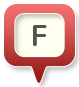
<style>
.page{position:relative;width:79px;height:87px;background:#ffffff}
.page>*{position:absolute;margin:0}
.t1{font:30px "Nunito-Regular";letter-spacing:0.022em;color:#545350}
</style>
<div class="page">
<p class="t1" style="left:33px;top:25px;width:14px;height:21px">F</p>
</div>
